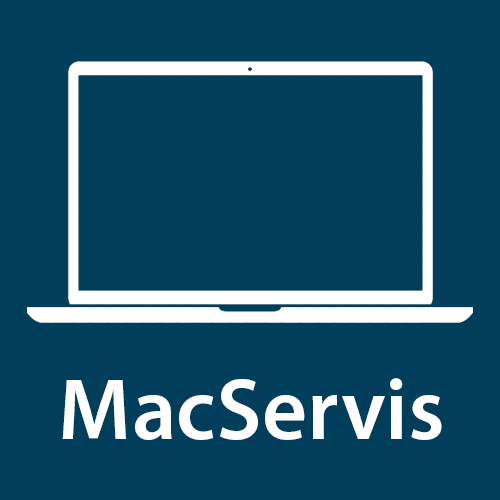
<style>
.page{position:relative;width:500px;height:500px;background:#013e5b}
.page>*{position:absolute;margin:0}
.t1{font:88px "MyriadPro-Semibold";color:#ffffff}
</style>
<div class="page">
<p class="t1" style="left:62px;top:378px;width:380px;height:62px">MacServis</p>
</div>
